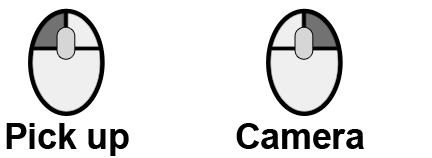
<style>
.page{position:relative;width:432px;height:158px;background:#ffffff}
.page>*{position:absolute;margin:0}
.t1{font:36px "Arial-BoldMT";letter-spacing:-0.01em;color:#000000}
</style>
<div class="page">
<p class="t1" style="left:6px;top:123px;width:123px;height:33px">Pick up</p>
<p class="t1" style="left:236px;top:123px;width:128px;height:26px">Camera</p>
</div>
